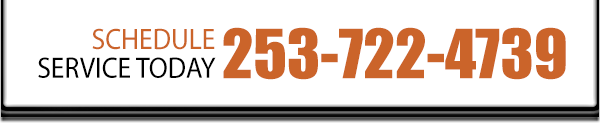
<style>
.page{position:relative;width:600px;height:128px;background:#ffffff}
.page>*{position:absolute;margin:0}
.t1{font:29.6px/28.8px "MyriadPro-Regular";color:#000000;scale:0.93 1}
.t2{font:29.6px/28.8px "MyriadPro-Regular";color:#cb642a;scale:0.93 1}
.t3{font:62.8px "Impact";color:#cb642a}
</style>
<div class="page">
<p class="t1" style="left:38px;top:28px;width:178px;height:50px;text-align:right"><span class="t2">SCHEDULE<br></span>SERVICE TODAY</p>
<p class="t3" style="left:223px;top:27px;width:343px;height:53px">253-722-4739</p>
</div>
